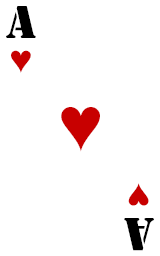
<style>
.page{position:relative;width:160px;height:256px;background:#ffffff}
.page>*{position:absolute;margin:0}
.t1{font:48px "Stencil";color:#000000}
.t2{font:36px "TimesNewRomanPSMT";color:#c80000}
.t3{font:72px "TimesNewRomanPSMT";color:#c80000}
.t4{font:36.1px "TimesNewRomanPSMT";color:#c80000}
.t5{font:48.2px "Stencil";color:#000000}
</style>
<div class="page">
<p class="t1" style="left:6px;top:6px;width:30px;height:32px">A</p>
<p class="t2" style="left:11px;top:50px;width:20px;height:23px">♥</p>
<p class="t3" style="left:61px;top:107px;width:39px;height:45px">♥</p>
<p class="t4" style="left:128px;top:183px;width:21px;height:23px;rotate:180deg">♥</p>
<p class="t5" style="left:124px;top:218px;width:30px;height:33px;rotate:180deg">A</p>
</div>
